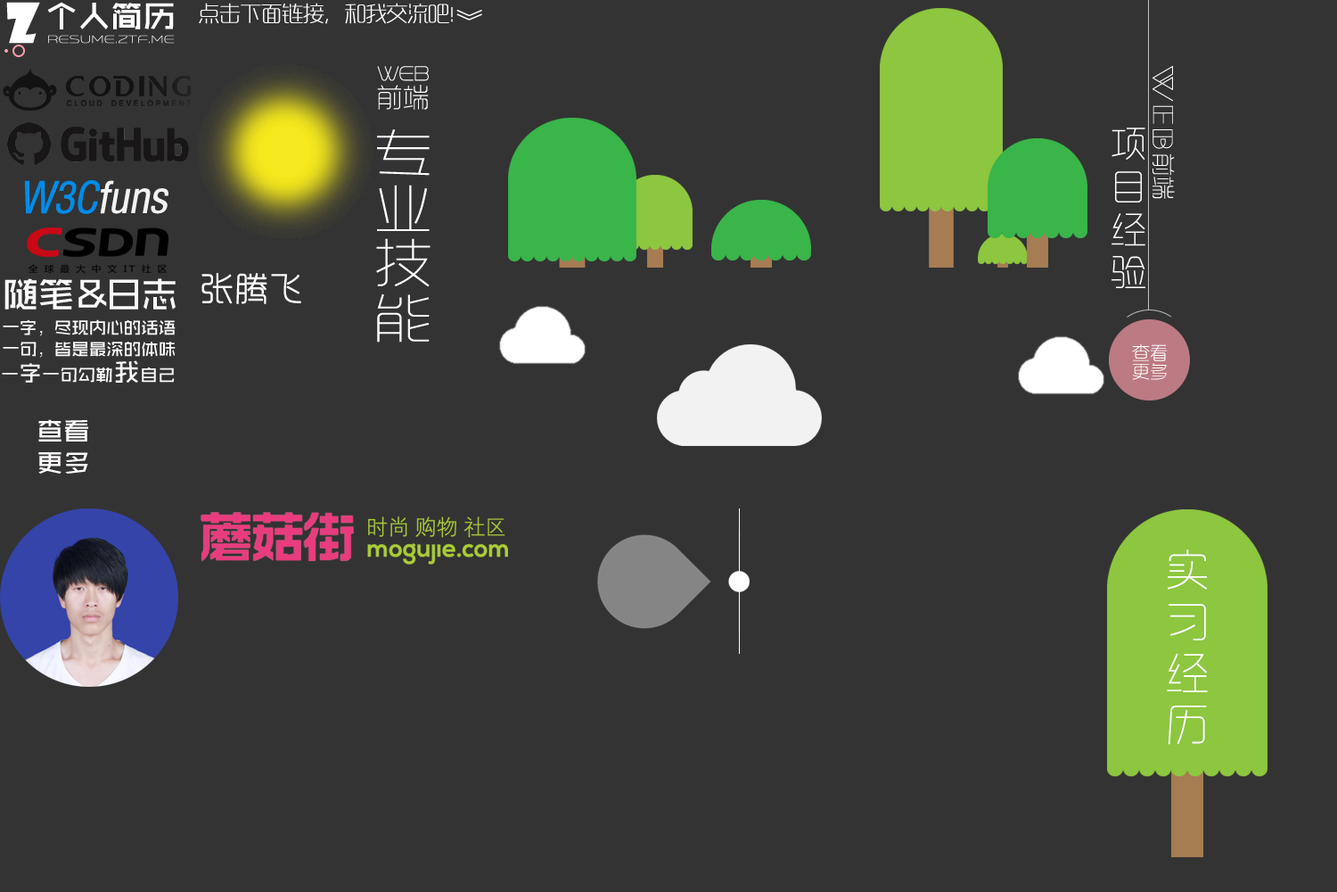
<style>
.page{position:relative;width:1337px;height:892px;background:#333333}
.page>*{position:absolute;margin:0}
.t1{font:53.5px "ShowcardGothic-Reg";letter-spacing:-0.01em;color:#ffffff;font-weight:bold}
.t2{font:32.1px "ZHSCNMT--GBK1-0";letter-spacing:-0.01em;color:#ffffff;font-weight:bold}
.t3{font:21.4px "RTWSYueGoTrial-ExLight";letter-spacing:-0.05em;color:#fdfafa;font-weight:bold}
.t4{font:26.7px "RTWSYueGoTrial-ExLight";letter-spacing:-0.05em;color:#fdfafa;font-weight:bold}
.t5{font:10.7px "Venera100";letter-spacing:0.025em;color:#ffffff;font-weight:bold}
.t6{font:19.9px "Venera100";letter-spacing:-0.05em;color:#ffffff;font-weight:bold;scale:0.78 1}
.t7{font:26.7px "ManbowClear-Regular";color:#ffffff}
.t8{font:26px "RTWSYueGoTrial-ExLight";letter-spacing:0.025em;color:#ffffff}
.t9{font:51.6px/54.9px "RTWSYueGoTrial-ExLight";color:#ffffff;scale:1.12 1}
.t10{font:35.7px "RTWSYueGoTrial-ExLight";color:#ffffff}
.t11{font:23.2px "RTWSYueGoTrial-ExLight";color:#ffffff}
.t12{font:37.4px "ZHSCNMT--GBK1-0";letter-spacing:-0.05em;color:#fdfafa}
.t13{font:32.1px "RTWSYueGoTrial-ExLight";letter-spacing:0.05em;color:#fffdfd;font-weight:bold}
.t14{font:17.8px/21.4px "ZHSCNMT--GBK1-0";letter-spacing:-0.025em;color:#fdfafa}
.t15{font:17.8px/18.7px "RTWSYueGoTrial-ExLight";color:#ffffff}
.t16{font:17.8px "ZHSCNMT--GBK1-0";color:#fdfafa}
.t17{font:23.2px "ZHSCNMT--GBK1-0";color:#fdfafa}
.t18{font:26.7px "ZHSCNMT--GBK1-0";color:#fdfafa}
.t19{font:26.7px/32.1px "ZHSCNMT--GBK1-0";color:#fdfafa}
.t20{font:42.8px "RTWSYueGoTrial-ExLight";color:#ffffff}
</style>
<div class="page">
<p class="t1" style="left:6px;top:2px;width:34px;height:42px">z</p>
<p class="t2" style="left:47px;top:2px;width:127px;height:27px">个人简历</p>
<p class="t3" style="left:199px;top:3px;width:254px;height:21px">点击下面链接，和我交流吧！</p>
<p class="t4" style="left:457px;top:10px;width:25px;height:11px;rotate:90deg">》</p>
<p class="t5" style="left:48px;top:35px;width:127px;height:9px">resume.ztf.me</p>
<p class="t6" style="left:377px;top:66px;width:52px;height:15px">WEB</p>
<p class="t7" style="left:1153px;top:65px;width:20px;height:37px;rotate:90deg">W</p>
<p class="t8" style="left:377px;top:85px;width:52px;height:25px">前端</p>
<p class="t7" style="left:1153px;top:105px;width:20px;height:19px;rotate:90deg">E</p>
<p class="t9" style="left:376px;top:129px;width:55px;height:213px">专<br>业<br>技<br>能</p>
<p class="t10" style="left:1112px;top:127px;width:34px;height:161px">项<br>目<br>经<br>验</p>
<p class="t7" style="left:1153px;top:129px;width:20px;height:20px;rotate:90deg">B</p>
<p class="t11" style="left:1153px;top:153px;width:22px;height:46px;rotate:90deg">前端</p>
<p class="t12" style="left:4px;top:278px;width:172px;height:31px">随笔&amp;日志</p>
<p class="t13" style="left:202px;top:273px;width:99px;height:31px">张腾飞</p>
<p class="t14" style="left:3px;top:319px;width:173px;height:39px">一字，尽现内心的话语<br>一句，皆是最深的体味</p>
<p class="t15" style="left:1132px;top:344px;width:36px;height:36px">查看<br>更多</p>
<p class="t16" style="left:2px;top:360px;width:173px;height:22px">一<span class="t17">字</span>一句勾勒<span class="t18">我</span>自己</p>
<p class="t19" style="left:38px;top:419px;width:50px;height:54px">查看<br>更多</p>
<p class="t20" style="left:1167px;top:549px;width:41px;height:195px">实<br>习<br>经<br>历</p>
</div>
